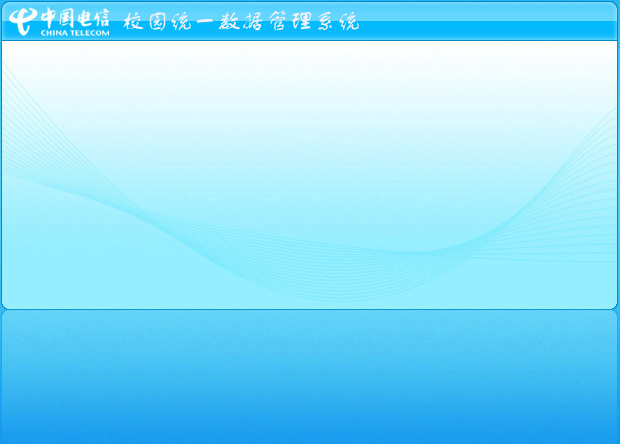
<style>
.page{position:relative;width:620px;height:444px}
.page>*{position:absolute;margin:0}
.t1{font:24px "FZSTK--GBK1-0";color:#f3f2f6}
</style>
<div class="page">
<p class="t1" style="left:123px;top:10px;width:236px;height:21px">校园统一数据管理系统</p>
</div>
